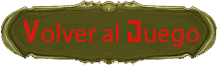
<style>
.page{position:relative;width:218px;height:66px;background:#544e1a}
.page>*{position:absolute;margin:0}
.t1{font:26.7px "MyriadPro-Regular";color:#e90f0f}
.t2{font:26.7px "UrbanStencil-Regular";color:#e90f0f}
</style>
<div class="page">
<p class="t1" style="left:23px;top:20px;width:176px;height:27px"><span class="t2">V</span>olver al<span class="t2"> J</span>uego</p>
</div>
